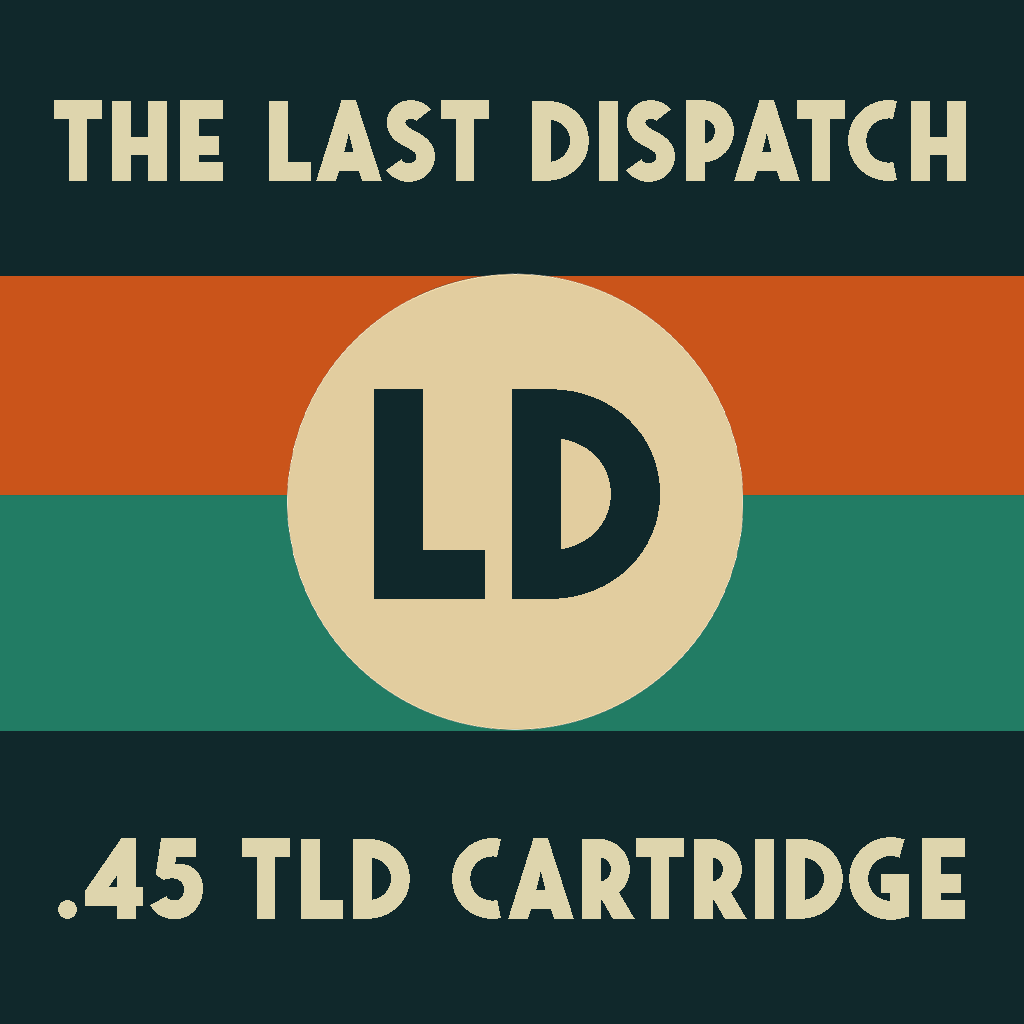
<style>
.page{position:relative;width:1024px;height:1024px;background:#10282b}
.page>*{position:absolute;margin:0}
.t1{font:115px "SaveurSans-Bold";color:#ded5ad}
.t2{font:300px "SaveurSans-Bold";color:#10282b}
</style>
<div class="page">
<p class="t1" style="left:54px;top:100px;width:912px;height:82px">THE LAST DISPATCH</p>
<p class="t2" style="left:374px;top:389px;width:286px;height:210px">LD</p>
<p class="t1" style="left:58px;top:837px;width:907px;height:83px">.45 TLD CARTRIDGE</p>
</div>
